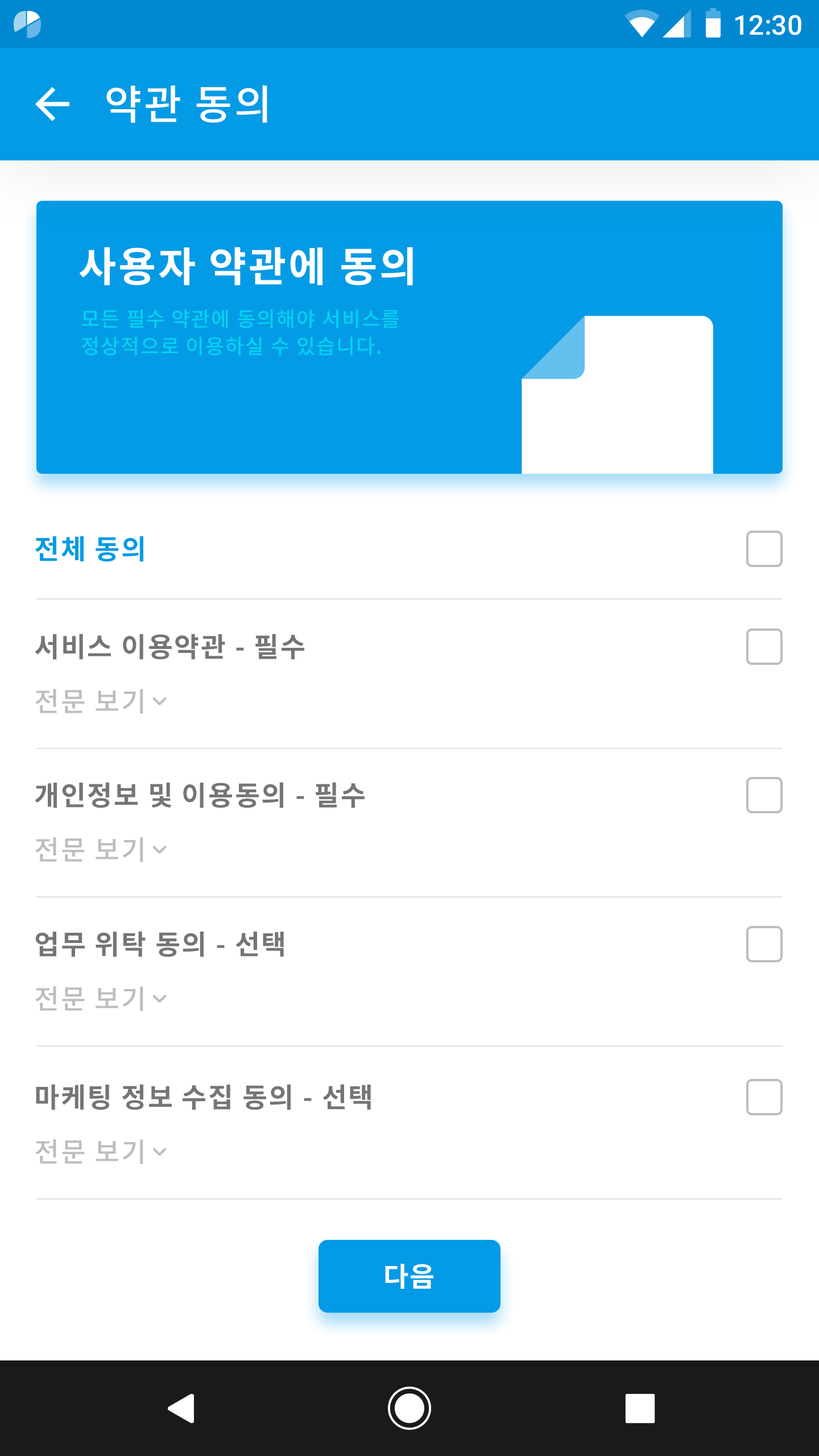
<style>
.page{position:relative;width:819px;height:1456px;background:#ffffff}
.page>*{position:absolute;margin:0}
.t1{font:27.3px "Roboto-Medium";color:#ffffff}
.t2{font:40.9px "NotoSansCJKkr-Medium";letter-spacing:0.05em;color:#ffffff}
.t3{font:40.9px "NotoSansCJKkr-Bold";letter-spacing:0.05em;color:#ffffff}
.t4{font:20.5px/27.3px "NotoSansCJKkr-Medium";letter-spacing:0.05em;color:#04d1f2}
.t5{font:27.3px "NotoSansCJKkr-Bold";letter-spacing:0.05em;color:#039be5}
.t6{font:27.3px "NotoSansCJKkr-Bold";letter-spacing:0.05em;color:#757575}
.t7{font:27.3px "NotoSansCJKkr-Medium";letter-spacing:0.05em;color:#bdbdbd}
.t8{font:27.3px "NotoSansCJKkr-Bold";letter-spacing:0.05em;color:#ffffff}
</style>
<div class="page">
<p class="t1" style="left:735px;top:15px;width:66px;height:20px">12:30</p>
<p class="t2" style="left:106px;top:85px;width:161px;height:38px">약관 동의</p>
<p class="t3" style="left:79px;top:247px;width:334px;height:39px">사용자 약관에 동의</p>
<p class="t4" style="left:81px;top:309px;width:318px;height:46px">모든 필수 약관에 동의해야 서비스를<br>정상적으로 이용하실 수 있습니다.</p>
<p class="t5" style="left:35px;top:536px;width:108px;height:26px">전체 동의</p>
<p class="t6" style="left:35px;top:634px;width:269px;height:26px">서비스 이용약관 - 필수</p>
<p class="t7" style="left:35px;top:689px;width:108px;height:25px">전문 보기</p>
<p class="t6" style="left:35px;top:782px;width:330px;height:26px">개인정보 및 이용동의 - 필수</p>
<p class="t7" style="left:35px;top:837px;width:108px;height:25px">전문 보기</p>
<p class="t6" style="left:35px;top:931px;width:249px;height:26px">업무 위탁 동의 - 선택</p>
<p class="t7" style="left:35px;top:986px;width:108px;height:25px">전문 보기</p>
<p class="t6" style="left:36px;top:1084px;width:335px;height:26px">마케팅 정보 수집 동의 - 선택</p>
<p class="t7" style="left:35px;top:1139px;width:108px;height:25px">전문 보기</p>
<p class="t8" style="left:385px;top:1264px;width:48px;height:25px">다음</p>
</div>
